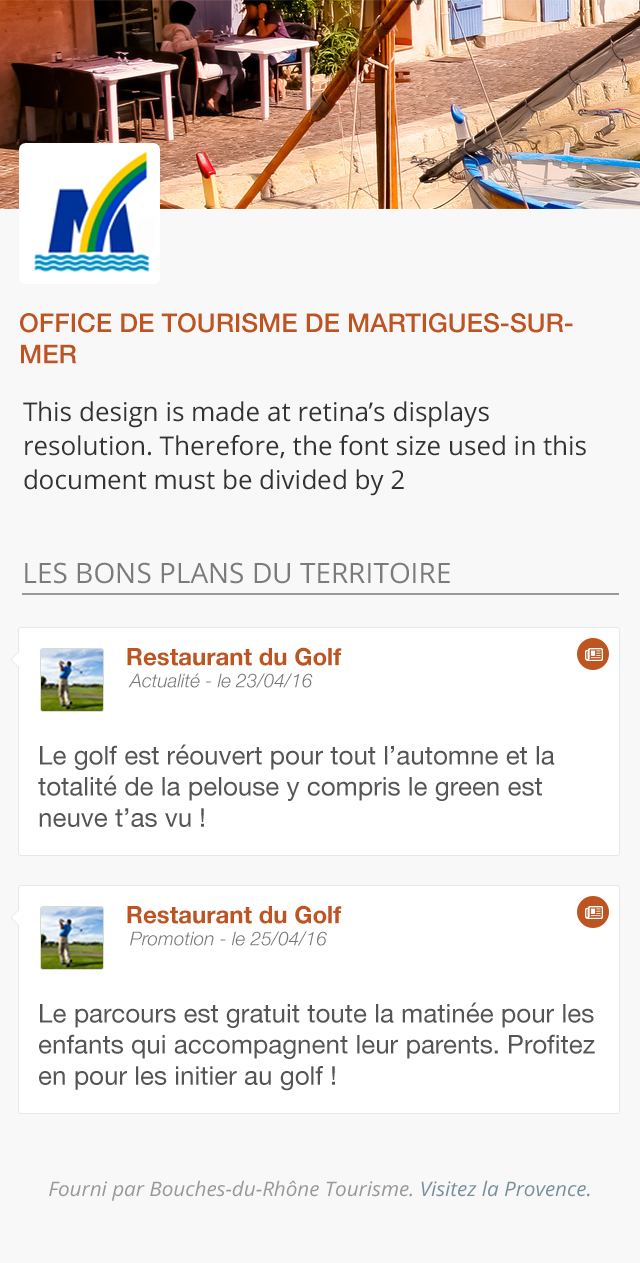
<style>
.page{position:relative;width:640px;height:1263px;background:#f8f8f8}
.page>*{position:absolute;margin:0}
.t1{font:26px "HelveticaNeue-Medium";color:#be5521;text-transform:uppercase}
.t2{font:26px/34px "OpenSans";color:#333333}
.t3{font:28px "OpenSans";color:#7b7b7b}
.t4{font:24px "HelveticaNeue-Bold";color:#be5521}
.t5{font:19px "HelveticaNeue-LightItalic";color:#777777}
.t6{font:26px "HelveticaNeue";color:#555555}
.t7{font:20px "OpenSans-Italic";color:#989898;scale:1.03 1}
.t8{font:20px "OpenSans-Italic";color:#78909c;scale:1.03 1}
</style>
<div class="page">
<p class="t1" style="left:20px;top:313px;width:553px;height:51px">Office de Tourisme de Martigues-sur-<br>mer</p>
<p class="t2" style="left:23px;top:401px;width:563px;height:95px">This design is made at retina’s displays resolution. Therefore, the font size used in this document must be divided by 2</p>
<p class="t3" style="left:25px;top:562px;width:425px;height:22px">LES BONS PLANS DU TERRITOIRE</p>
<p class="t4" style="left:127px;top:647px;width:215px;height:19px">Restaurant du Golf</p>
<p class="t5" style="left:128px;top:673px;width:185px;height:15px">Actualité - le 23/04/16</p>
<p class="t6" style="left:38px;top:744px;width:517px;height:83px">Le golf est réouvert pour tout l’automne et la totalité de la pelouse y compris le green est neuve t’as vu !</p>
<p class="t4" style="left:127px;top:905px;width:215px;height:19px">Restaurant du Golf</p>
<p class="t5" style="left:130px;top:931px;width:197px;height:15px">Promotion - le 25/04/16</p>
<p class="t6" style="left:39px;top:1002px;width:556px;height:89px">Le parcours est gratuit toute la matinée pour les enfants qui accompagnent leur parents. Profitez en pour les initier au golf !</p>
<p class="t7" style="left:49px;top:1180px;width:541px;height:21px">Fourni par Bouches-du-Rhône Tourisme. <span class="t8">Visitez la Provence.</span></p>
</div>
